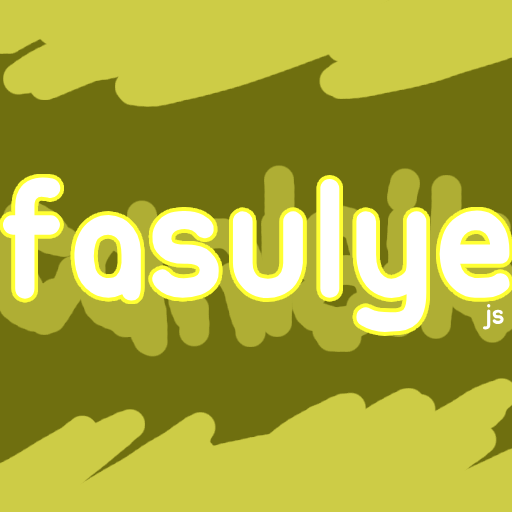
<style>
.page{position:relative;width:512px;height:512px;background:#6f6f0f}
.page>*{position:absolute;margin:0}
.t1{font:182.1px "Ubuntu-Title";color:#ffffff}
.t2{font:30px "Ubuntu-Title";color:#ffffff}
</style>
<div class="page">
<p class="t1" style="left:3px;top:177px;width:507px;height:155px">fasulye</p>
<p class="t2" style="left:482px;top:304px;width:22px;height:26px">js</p>
</div>
